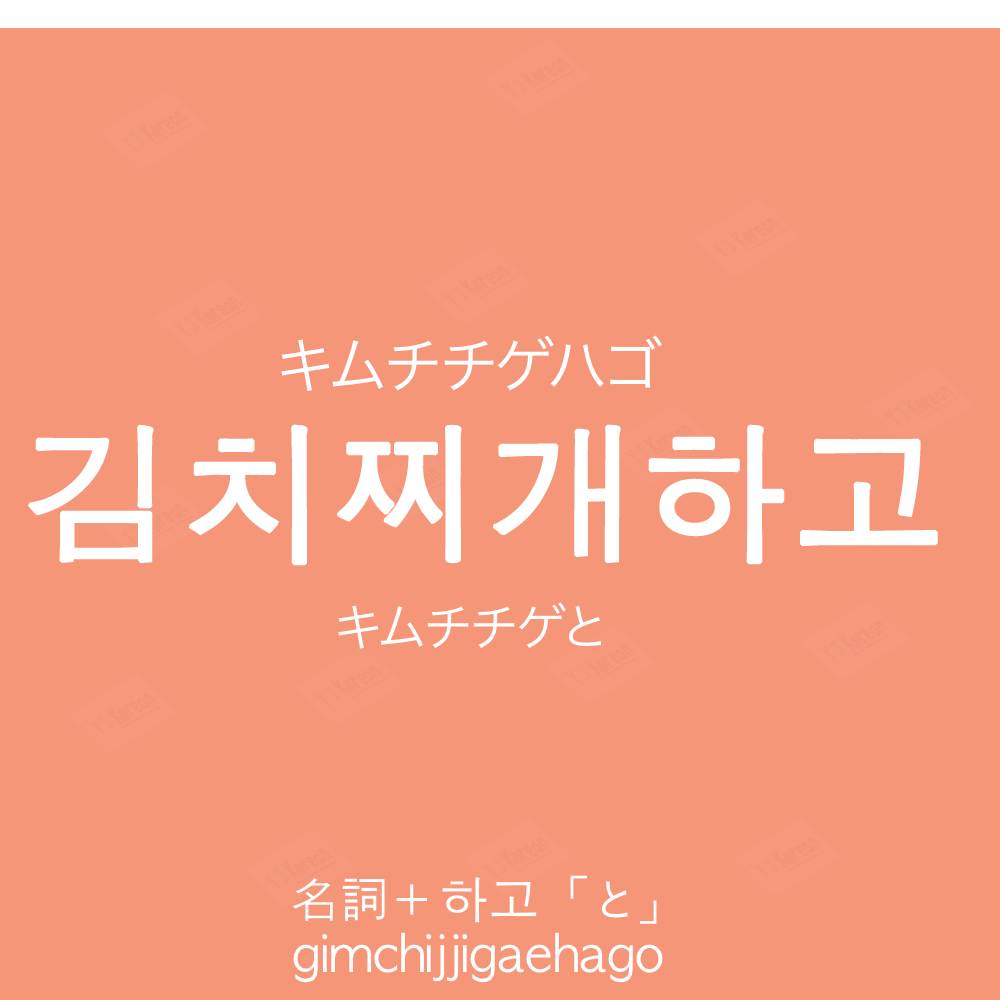
<style>
.page{position:relative;width:1000px;height:1000px;background:#f69679}
.page>*{position:absolute;margin:0}
.t1{font:60px "HiraKakuProN-W3";color:#ffffff;text-transform:uppercase}
.t2{font:150px "AppleGothic";color:#ffffff;font-weight:bold}
.t3{font:50px "HiraKakuProN-W3";color:#ffffff}
.t4{font:50px "AppleGothic";color:#ffffff}
</style>
<div class="page">
<p class="t1" style="left:281px;top:335px;width:381px;height:57px">キムチチゲハゴ</p>
<p class="t2" style="left:28px;top:424px;width:910px;height:142px">김치찌개하고</p>
<p class="t3" style="left:338px;top:602px;width:263px;height:47px">キムチチゲと</p>
<p class="t4" style="left:293px;top:875px;width:364px;height:49px">名詞＋하고「と」</p>
<p class="t4" style="left:293px;top:932px;width:370px;height:51px">gimchijjigaehago</p>
</div>
